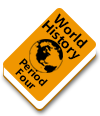
<style>
.page{position:relative;width:100px;height:116px;background:#ffffff}
.page>*{position:absolute;margin:0}
.t1{font:14.2px/12.3px "LaoUI-Bold";color:#000000}
.t2{font:11.4px/10.3px "LaoUI-Bold";color:#000000}
</style>
<div class="page">
<p class="t1" style="left:41px;top:13px;width:47px;height:47px;text-align:center;rotate:45deg">World<br>History</p>
<p class="t2" style="left:15px;top:58px;width:33px;height:31px;text-align:center;rotate:45deg">Period <br>Four</p>
</div>
